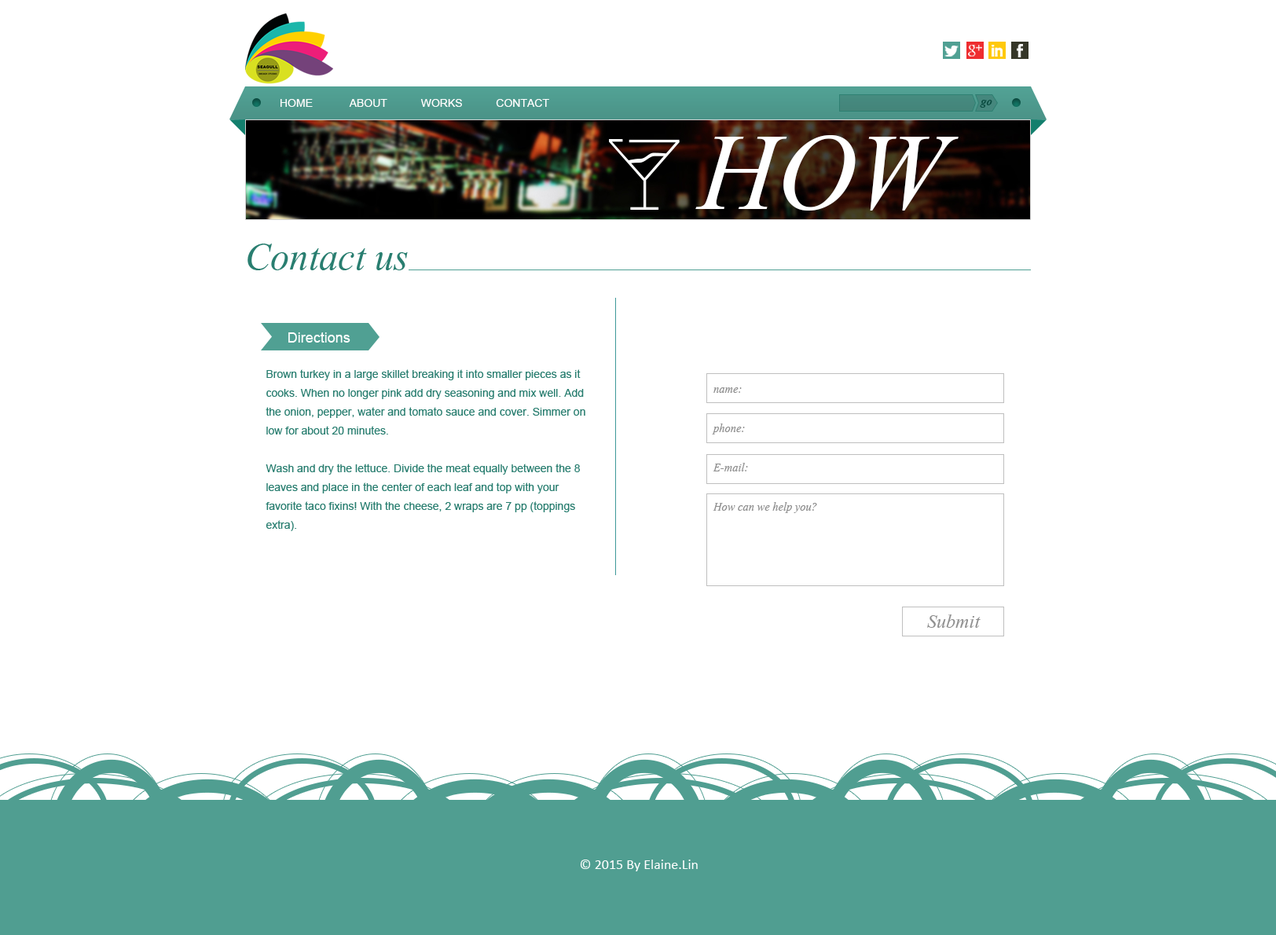
<style>
.page{position:relative;width:1276px;height:935px;background:#ffffff}
.page>*{position:absolute;margin:0}
.t1{font:11px "ArialMT";color:#ffffff;text-transform:uppercase}
.t2{font:14.1px "Aparajita-BoldItalic";color:#0b4c41}
.t3{font:47.1px "Aparajita-Italic";color:#297e70}
.t4{font:11px/18.9px "ArialMT";color:#297e70}
.t5{font:14.1px/18.9px "ArialMT";color:#ffffff}
.t6{font:14.1px/39.3px "Aparajita-Italic";color:#8f8f8f}
.t7{font:23.6px "Aparajita-Italic";color:#8f8f8f}
.t8{font:14.1px "Calibri";color:#ffffff}
</style>
<div class="page">
<p class="t1" style="left:280px;top:99px;width:269px;height:8px">HOME            ABOUT           works           CONTACT</p>
<p class="t2" style="left:980px;top:100px;width:12px;height:8px">go</p>
<p class="t3" style="left:247px;top:244px;width:161px;height:26px">Contact us</p>
<p class="t4" style="left:266px;top:332px;width:319px;height:199px"><span class="t5">Directions<br></span><br>Brown turkey in a large skillet breaking it into smaller pieces as it cooks. When no longer pink add dry seasoning and mix well. Add the onion, pepper, water and tomato sauce and cover. Simmer on low for about 20 minutes.<br><br>Wash and dry the lettuce. Divide the meat equally between the 8 leaves and place in the center of each leaf and top with your favorite taco fixins! With the cheese, 2 wraps are 7 pp (toppings extra).</p>
<p class="t6" style="left:712px;top:387px;width:105px;height:126px">name:<br>phone:<br>E-mail:<br>How can we help you?</p>
<p class="t7" style="left:927px;top:614px;width:53px;height:14px">Submit</p>
<p class="t8" style="left:580px;top:859px;width:118px;height:12px">© 2015 By Elaine.Lin</p>
</div>
